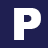
<style>
.page{position:relative;width:48px;height:48px;background:#1f1f51}
.page>*{position:absolute;margin:0}
.t1{font:44px "Arial-Black";color:#ffffff}
</style>
<div class="page">
<p class="t1" style="left:14px;top:8px;width:27px;height:32px">P</p>
</div>
